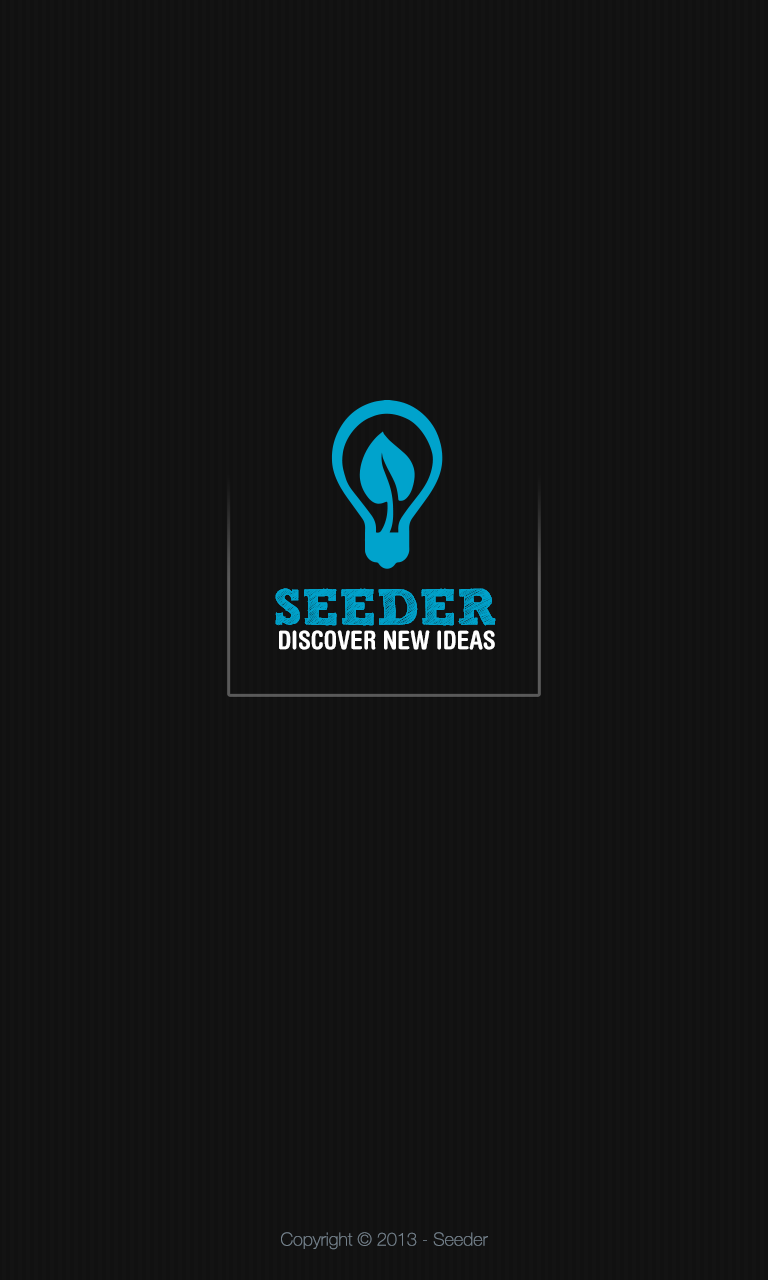
<style>
.page{position:relative;width:768px;height:1280px;background:#131313}
.page>*{position:absolute;margin:0}
.t1{font:51.1px "SketchRockwell";color:#00a3cc}
.t2{font:25.8px "HelveticaRoundedLTStd-BdCn";color:#ffffff}
.t3{font:18px "HelveticaNeueLTStd-Th";color:#74818b}
</style>
<div class="page">
<p class="t1" style="left:275px;top:588px;width:221px;height:38px">SEEDER</p>
<p class="t1" style="left:275px;top:588px;width:221px;height:38px">SEEDER</p>
<p class="t2" style="left:279px;top:630px;width:216px;height:20px">DISCOVER NEW IDEAS</p>
<p class="t3" style="left:281px;top:1232px;width:207px;height:18px">Copyright © 2013 - Seeder</p>
</div>
